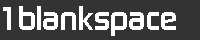
<style>
.page{position:relative;width:200px;height:40px;background:#333333}
.page>*{position:absolute;margin:0}
.t1{font:34px "DigitalTS-Medium";color:#ffffff}
</style>
<div class="page">
<p class="t1" style="left:3px;top:6px;width:173px;height:30px">1blankspace</p>
</div>
